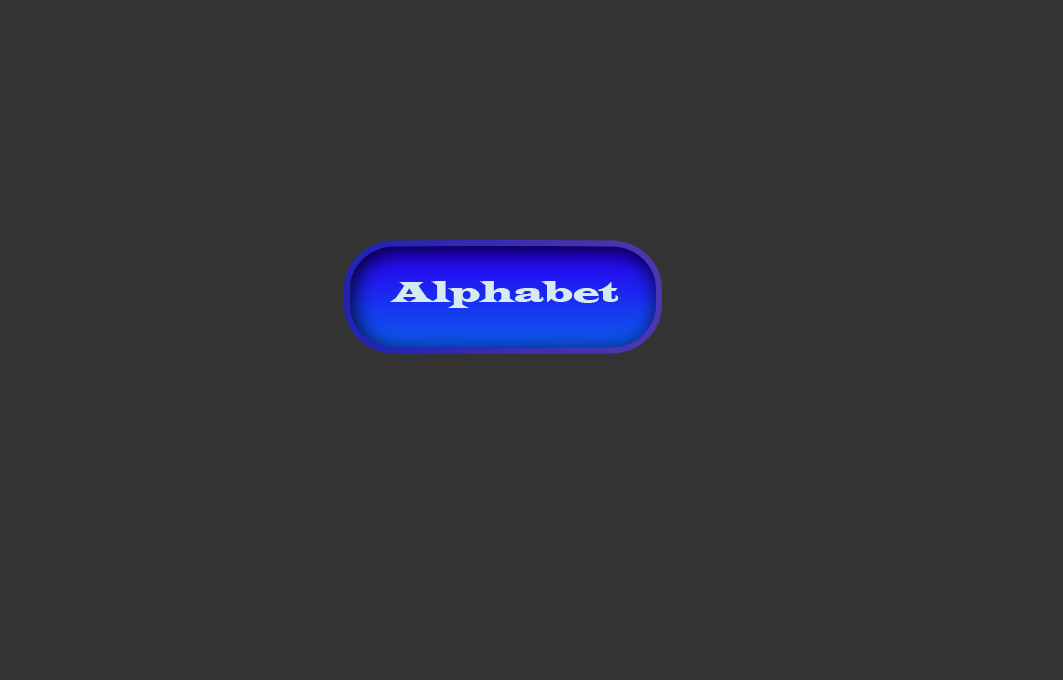
<style>
.page{position:relative;width:1063px;height:680px;background:#333333}
.page>*{position:absolute;margin:0}
.t1{font:30px "LatinWide";color:#d6eaf2}
</style>
<div class="page">
<p class="t1" style="left:390px;top:281px;width:229px;height:27px">Alphabet</p>
</div>
